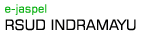
<style>
.page{position:relative;width:142px;height:35px;background:#ffffff}
.page>*{position:absolute;margin:0}
.t1{font:11.5px "Square721BT-Roman";color:#0ab112}
.t2{font:14.3px "Square721BT-Roman";color:#010100}
</style>
<div class="page">
<p class="t1" style="left:5px;top:4px;width:42px;height:11px">e-jaspel</p>
<p class="t2" style="left:5px;top:19px;width:131px;height:12px">RSUD INDRAMAYU</p>
</div>
